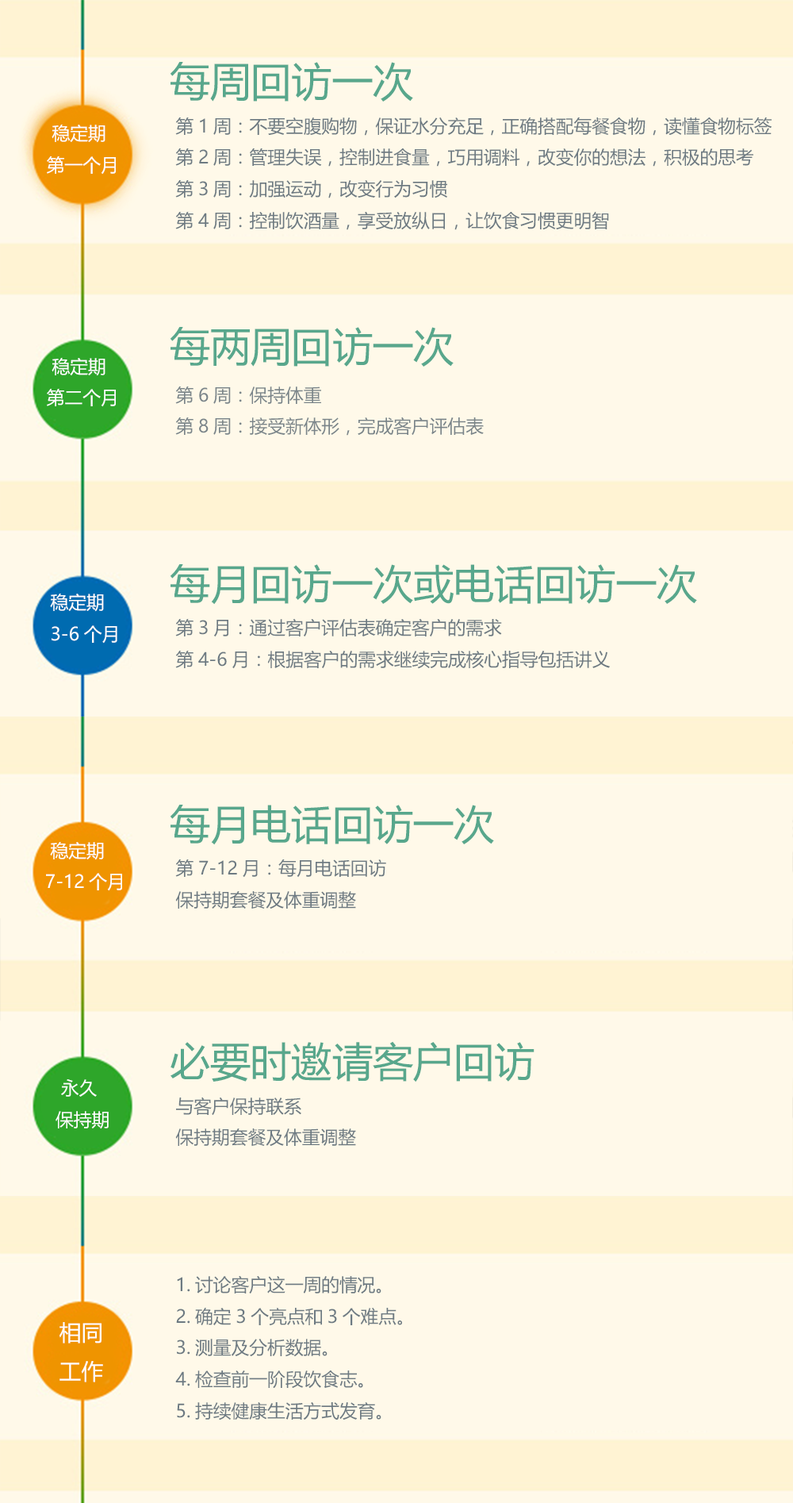
<style>
.page{position:relative;width:793px;height:1503px;background:#fff9e9}
.page>*{position:absolute;margin:0}
.t1{font:40.6px "MicrosoftYaHei";color:#58a78c}
.t2{font:18px "MicrosoftYaHei";color:#ffffff}
.t3{font:18px "MicrosoftYaHei";color:#6d7a82}
.t4{font:18px "MicrosoftYaHei";color:#7a858a}
.t5{font:22px "MicrosoftYaHei";color:#ffffff}
</style>
<div class="page">
<p class="t1" style="left:170px;top:62px;width:243px;height:40px">每周回访一次</p>
<p class="t2" style="left:47px;top:125px;width:69px;height:50px">稳定期<br>第一个月</p>
<p class="t3" style="left:175px;top:117px;width:597px;height:113px">第1周：不要空腹购物，保证水分充足，正确搭配每餐食物，读懂食物标签<br>第2周：管理失误，控制进食量，巧用调料，改变你的想法，积极的思考<br>第3周：加强运动，改变行为习惯<br>第4周：控制饮酒量，享受放纵日，让饮食习惯更明智</p>
<p class="t1" style="left:170px;top:327px;width:284px;height:40px">每两周回访一次</p>
<p class="t2" style="left:47px;top:358px;width:69px;height:49px">稳定期<br>第二个月</p>
<p class="t4" style="left:175px;top:386px;width:309px;height:50px">第6周：保持体重<br>第8周：接受新体形，完成客户评估表</p>
<p class="t1" style="left:170px;top:564px;width:527px;height:41px">每月回访一次或电话回访一次</p>
<p class="t2" style="left:50px;top:594px;width:67px;height:49px">稳定期<br> 3-6个月</p>
<p class="t3" style="left:175px;top:618px;width:435px;height:51px">第3月：通过客户评估表确定客户的需求<br>第4-6月：根据客户的需求继续完成核心指导包括讲义</p>
<p class="t1" style="left:170px;top:805px;width:324px;height:40px">每月电话回访一次</p>
<p class="t2" style="left:46px;top:842px;width:76px;height:49px">稳定期<br>7-12个月</p>
<p class="t3" style="left:175px;top:859px;width:211px;height:50px">第7-12月：每月电话回访<br>保持期套餐及体重调整</p>
<p class="t1" style="left:171px;top:1041px;width:364px;height:41px">必要时邀请客户回访</p>
<p class="t2" style="left:56px;top:1079px;width:53px;height:50px">永久<br>保持期</p>
<p class="t3" style="left:175px;top:1097px;width:181px;height:50px">与客户保持联系<br>保持期套餐及体重调整</p>
<p class="t3" style="left:175px;top:1275px;width:227px;height:145px">1.讨论客户这一周的情况。<br>2.确定3个亮点和3个难点。<br>3.测量及分析数据。<br>4.检查前一阶段饮食志。<br>5.持续健康生活方式发育。</p>
<p class="t5" style="left:60px;top:1322px;width:43px;height:60px">相同<br>工作</p>
</div>
